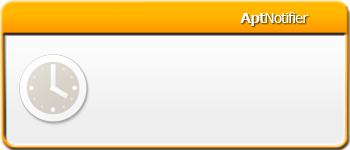
<style>
.page{position:relative;width:350px;height:150px}
.page>*{position:absolute;margin:0}
.t1{font:14px "Verdana";letter-spacing:-0.075em;color:#ffffff}
.t2{font:14px "Verdana-Bold";letter-spacing:-0.075em;color:#ffffff}
</style>
<div class="page">
<p class="t1" style="left:240px;top:12px;width:69px;height:14px"><span class="t2">Apt</span>Notifier</p>
</div>
